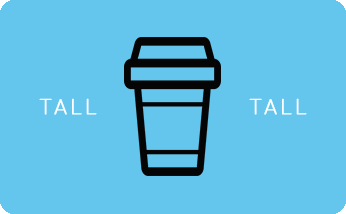
<style>
.page{position:relative;width:346px;height:214px;background:#64c6ec}
.page>*{position:absolute;margin:0}
.t1{font:22px "Quicksand-Regular";letter-spacing:0.08em;color:#ffffff;text-transform:uppercase;font-weight:bold}
</style>
<div class="page">
<p class="t1" style="left:39px;top:98px;width:58px;height:17px">tall</p>
<p class="t1" style="left:249px;top:98px;width:58px;height:17px">tall</p>
</div>
